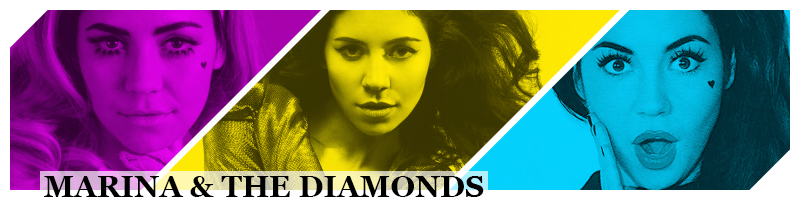
<style>
.page{position:relative;width:800px;height:200px}
.page>*{position:absolute;margin:0}
.t1{font:30px "Georgia-Bold";color:#000000}
</style>
<div class="page">
<p class="t1" style="left:44px;top:176px;width:440px;height:21px">MARINA &amp; THE DIAMONDS</p>
</div>
